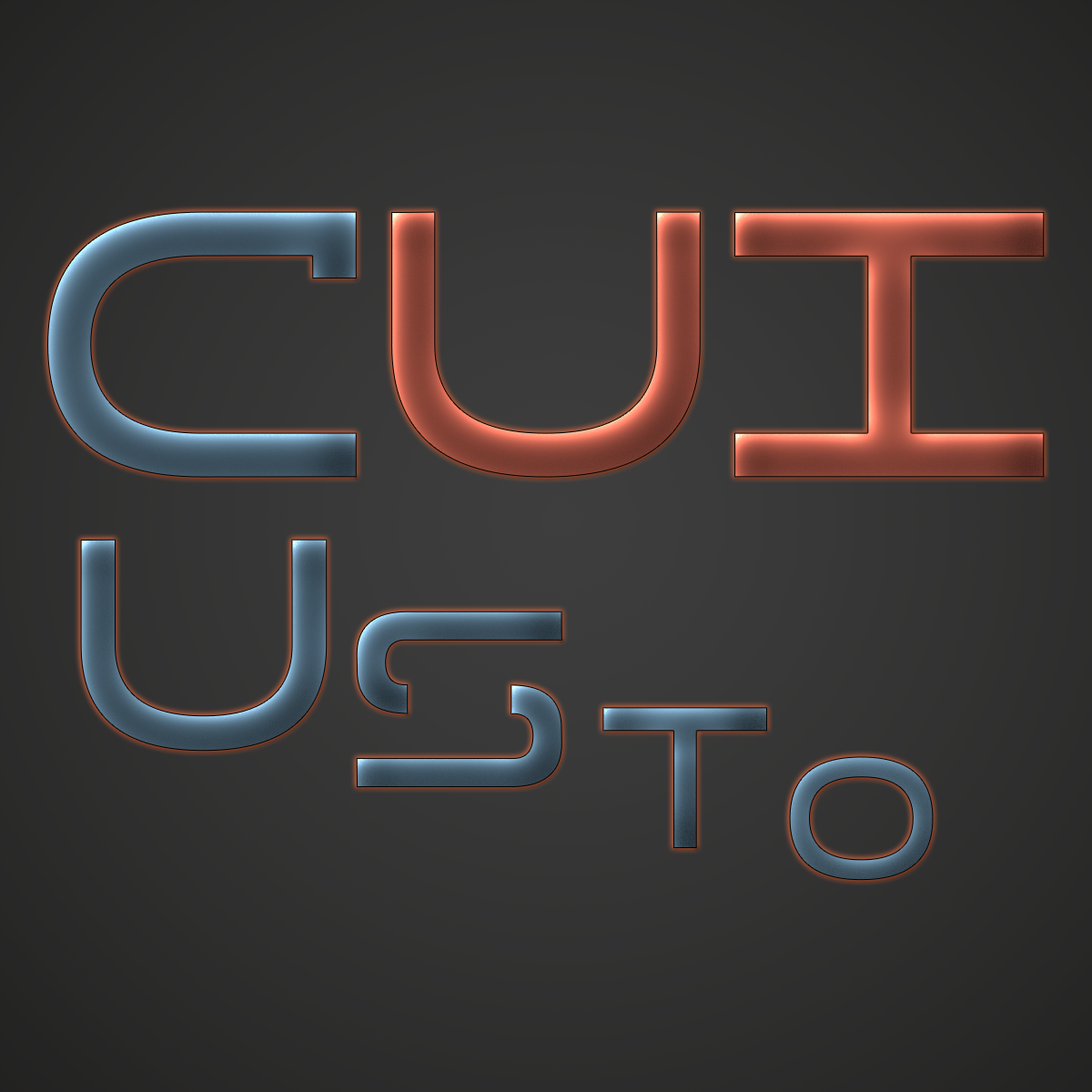
<style>
.page{position:relative;width:1092px;height:1092px}
.page>*{position:absolute;margin:0}
.t1{font:342.8px "Tele-Marines"}
.t2{font:273px "Tele-Marines";letter-spacing:-0.46em}
.t3{font:227.5px "Tele-Marines";letter-spacing:-0.46em}
.t4{font:182px "Tele-Marines";letter-spacing:-0.46em}
.t5{font:159.2px "Tele-Marines";letter-spacing:-0.46em}
</style>
<div class="page">
<p class="t1" style="left:47px;top:211px;width:998px;height:267px">CUI</p>
<p class="t2" style="left:80px;top:539px;width:248px;height:213px">U</p>
<p class="t3" style="left:356px;top:611px;width:206px;height:176px">s</p>
<p class="t4" style="left:602px;top:707px;width:165px;height:141px">t</p>
<p class="t5" style="left:789px;top:756px;width:145px;height:125px">o</p>
</div>
